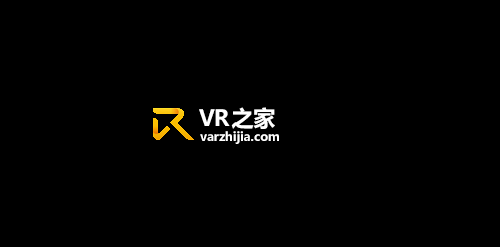
<style>
.page{position:relative;width:500px;height:247px;background:#000000}
.page>*{position:absolute;margin:0}
.t1{font:22px "MicrosoftYaHeiUI-Bold";color:#ffffff}
.t2{font:12px "MicrosoftYaHeiUI-Bold";color:#ffffff}
</style>
<div class="page">
<p class="t1" style="left:199px;top:107px;width:76px;height:22px">VR之家</p>
<p class="t2" style="left:200px;top:131px;width:79px;height:13px">varzhijia.com</p>
</div>
